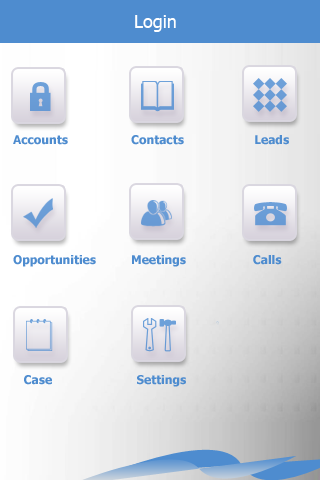
<style>
.page{position:relative;width:320px;height:480px}
.page>*{position:absolute;margin:0}
.t1{font:18px "Tahoma";color:#ffffff}
.t2{font:12px/120px "Tahoma-Bold";color:#4e8ccf}
</style>
<div class="page">
<p class="t1" style="left:135px;top:15px;width:41px;height:17px">Login</p>
<p class="t2" style="left:13px;top:135px;width:276px;height:252px">Accounts                  Contacts                    Leads<br>Opportunities          Meetings                   Calls<br>   Case                        Settings</p>
</div>
